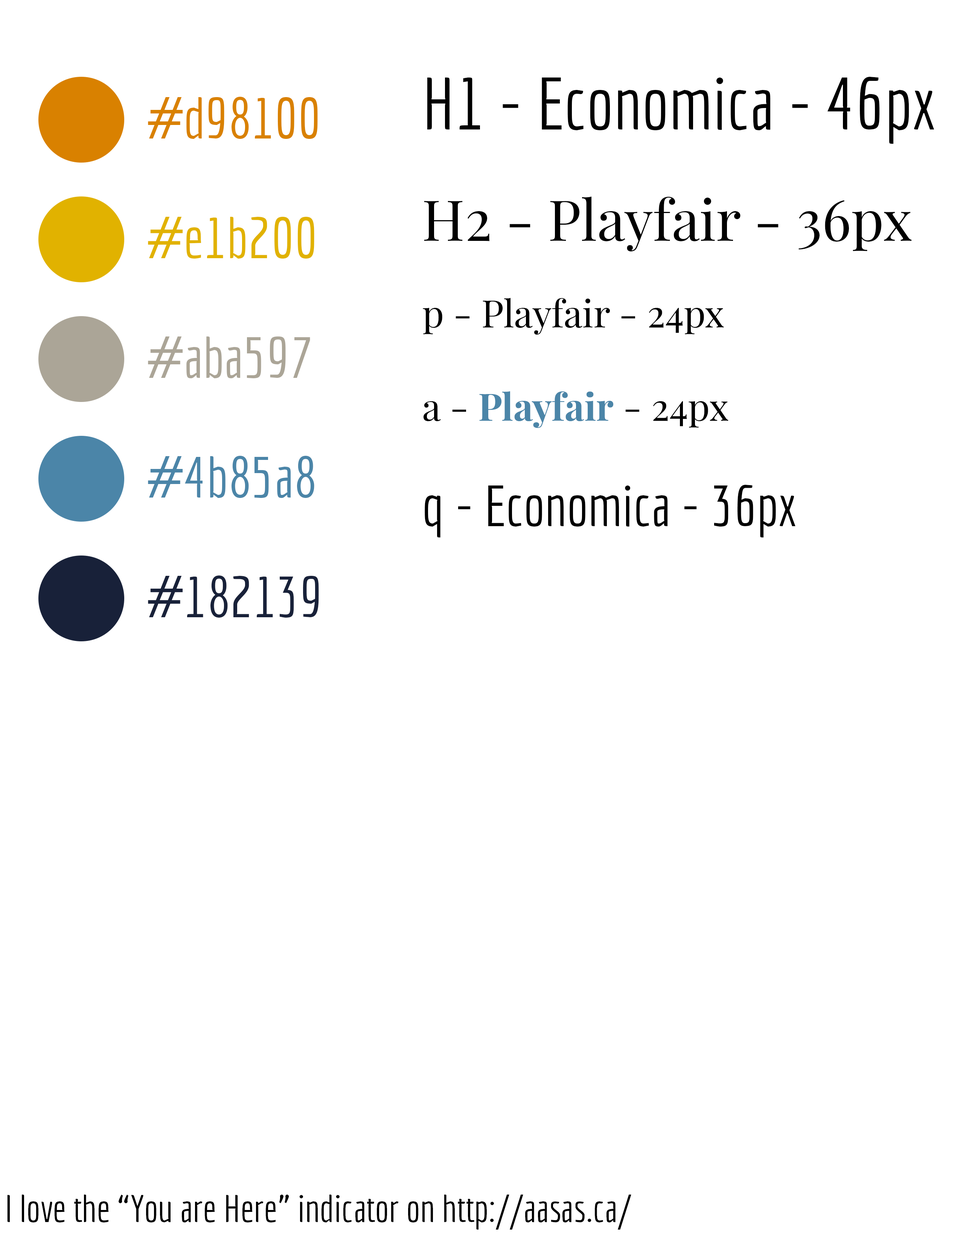
<style>
.page{position:relative;width:960px;height:1242px;background:#ffffff}
.page>*{position:absolute;margin:0}
.t1{font:72.2px "Economica-Regular";color:#000000}
.t2{font:56.5px "Economica-Regular";color:#d98100}
.t3{font:56.5px "PlayfairDisplay-Regular";color:#000000}
.t4{font:56.5px "Economica-Regular";color:#e1b200}
.t5{font:37.6px "PlayfairDisplay-Regular";color:#000000}
.t6{font:56.5px "Economica-Regular";color:#aba597}
.t7{font:37.6px "PlayfairDisplay-Bold";color:#4b85a8}
.t8{font:56.5px "Economica-Regular";color:#4b85a8}
.t9{font:56.5px "Economica-Regular";color:#000000}
.t10{font:56.5px "Economica-Regular";color:#182139}
.t11{font:37.6px "Economica-Regular";color:#000000}
</style>
<div class="page">
<p class="t1" style="left:427px;top:77px;width:507px;height:67px">H1 - Economica - 46px</p>
<p class="t2" style="left:148px;top:97px;width:170px;height:42px">#d98100</p>
<p class="t3" style="left:424px;top:196px;width:487px;height:55px">H2 - Playfair - 36px</p>
<p class="t4" style="left:148px;top:217px;width:166px;height:42px">#e1b200</p>
<p class="t5" style="left:423px;top:298px;width:301px;height:37px">p - Playfair - 24px</p>
<p class="t6" style="left:148px;top:336px;width:162px;height:43px">#aba597</p>
<p class="t7" style="left:423px;top:391px;width:305px;height:37px"><span class="t5">a - </span>Playfair<span class="t5"> - 24px</span></p>
<p class="t8" style="left:148px;top:456px;width:166px;height:42px">#4b85a8</p>
<p class="t9" style="left:425px;top:485px;width:370px;height:53px">q - Economica - 36px</p>
<p class="t10" style="left:148px;top:576px;width:171px;height:42px">#182139</p>
<p class="t11" style="left:7px;top:1195px;width:624px;height:35px">I love the “You are Here” indicator on http://aasas.ca/</p>
</div>
